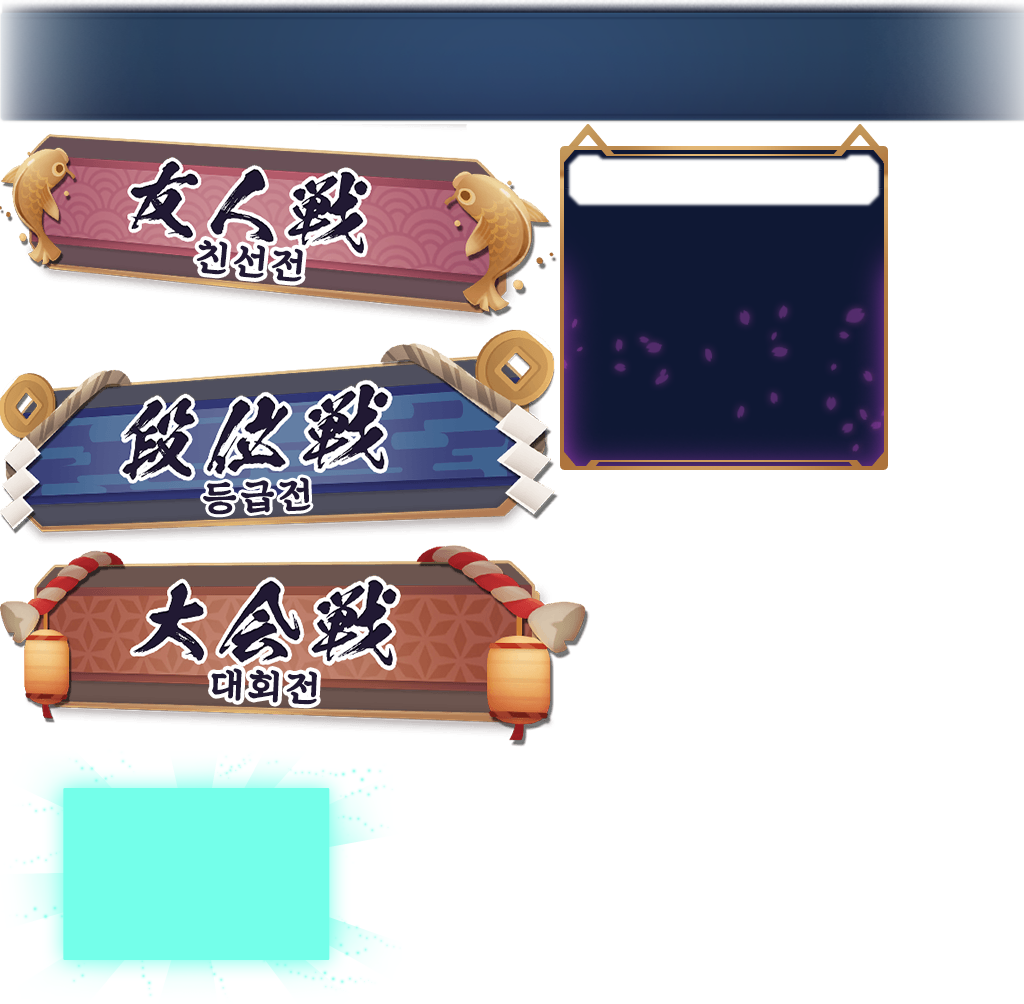
<style>
.page{position:relative;width:1024px;height:1004px;background:#ffffff}
.page>*{position:absolute;margin:0}
.t1{font:36.1px "SDKukdetopokki-aLt";letter-spacing:0.1em;color:#211933;font-weight:bold}
</style>
<div class="page">
<p class="t1" style="left:196px;top:240px;width:107px;height:42px;rotate:6deg">친선전</p>
<p class="t1" style="left:203px;top:477px;width:108px;height:38px;rotate:-2deg">등급전</p>
<p class="t1" style="left:211px;top:668px;width:106px;height:37px;rotate:3deg">대회전</p>
</div>
